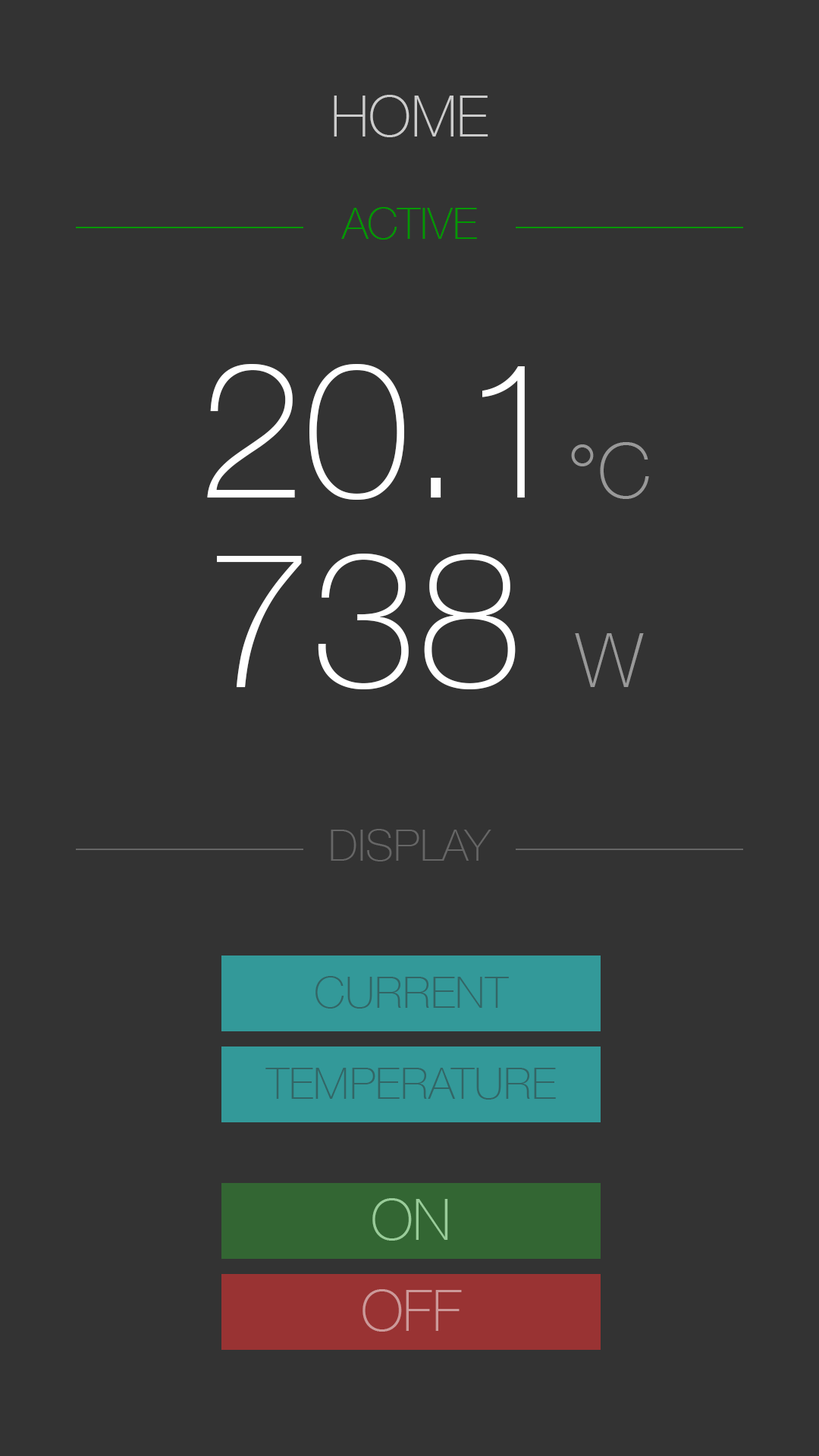
<style>
.page{position:relative;width:819px;height:1456px;background:#333333}
.page>*{position:absolute;margin:0}
.t1{font:56.9px "HelveticaNeue-Thin";color:#cccccc}
.t2{font:44.2px "HelveticaNeue-Thin";color:#009900}
.t3{font:189.6px "HelveticaNeue-Thin";color:#ffffff}
.t4{font:75.8px "HelveticaNeue-Thin";color:#999999}
.t5{font:44.2px "HelveticaNeue-Thin";color:#666666}
.t6{font:44.2px "HelveticaNeue-Thin";color:#336666}
.t7{font:56.9px "HelveticaNeue-Thin";color:#99cc99}
.t8{font:56.9px "HelveticaNeue-Thin";color:#cc9999}
</style>
<div class="page">
<p class="t1" style="left:334px;top:95px;width:154px;height:42px">HOME</p>
<p class="t2" style="left:341px;top:207px;width:136px;height:33px">ACTIVE</p>
<p class="t3" style="left:207px;top:364px;width:442px;height:136px">20.1<span class="t4">°C</span></p>
<p class="t3" style="left:217px;top:554px;width:427px;height:135px">738 <span class="t4">W</span></p>
<p class="t5" style="left:331px;top:829px;width:160px;height:32px">DISPLAY</p>
<p class="t6" style="left:315px;top:976px;width:194px;height:33px">CURRENT</p>
<p class="t6" style="left:265px;top:1068px;width:291px;height:32px">TEMPERATURE</p>
<p class="t7" style="left:372px;top:1198px;width:76px;height:43px">ON</p>
<p class="t8" style="left:362px;top:1289px;width:100px;height:43px">OFF</p>
</div>
